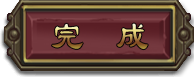
<style>
.page{position:relative;width:194px;height:77px}
.page>*{position:absolute;margin:0}
.t1{font:39.3px "LiSu";scale:0.83 1}
</style>
<div class="page">
<p class="t1" style="left:52px;top:23px;width:96px;height:27px">完  成</p>
</div>
